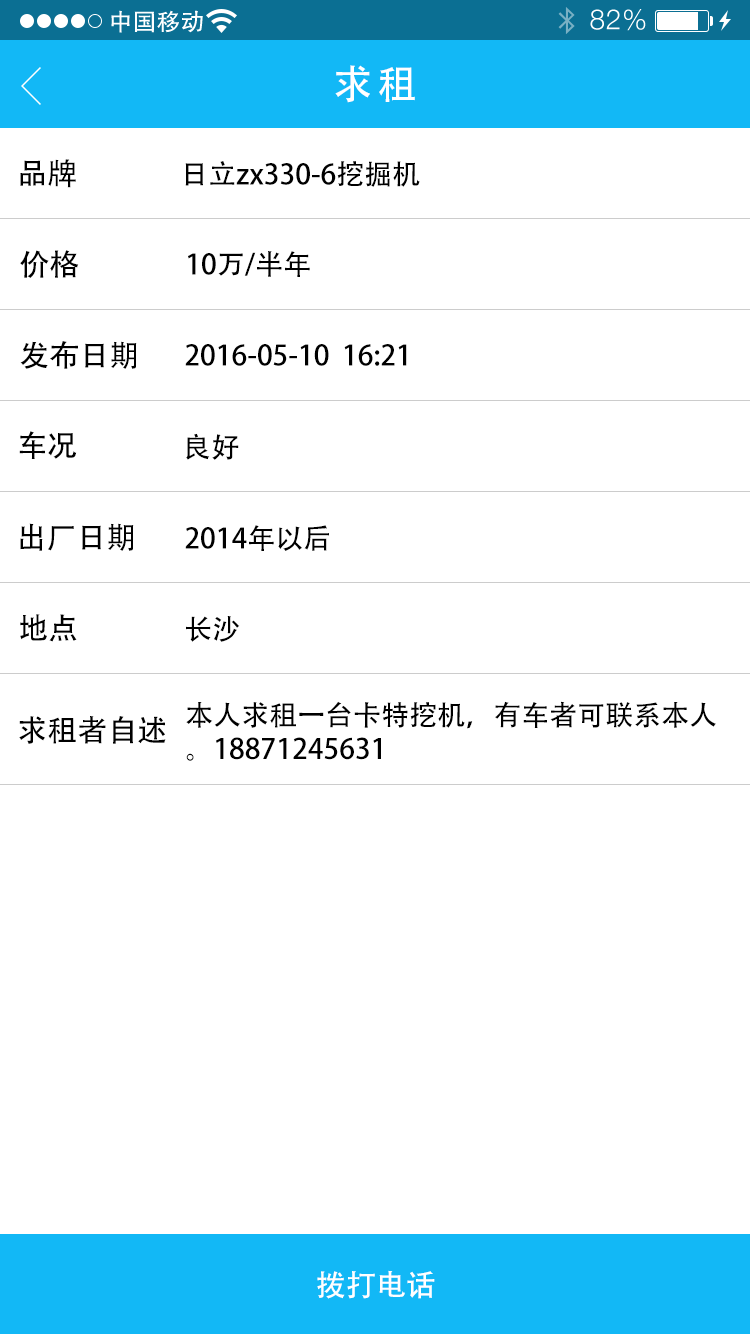
<style>
.page{position:relative;width:750px;height:1334px;background:#ffffff}
.page>*{position:absolute;margin:0}
.t1{font:40px "AdobeHeitiStd-Regular";letter-spacing:0.104em;color:#ffffff}
.t2{font:30px "AdobeHeitiStd-Regular";color:#000000}
.t3{font:28px "AdobeHeitiStd-Regular";color:#000000}
.t4{font:30px "AdobeHeitiStd-Regular";color:#ffffff}
</style>
<div class="page">
<p class="t1" style="left:335px;top:65px;width:80px;height:38px">求租</p>
<p class="t2" style="left:20px;top:159px;width:56px;height:29px">品牌</p>
<p class="t3" style="left:185px;top:161px;width:235px;height:26px">日立zx330-6挖掘机</p>
<p class="t2" style="left:20px;top:250px;width:59px;height:28px">价格</p>
<p class="t3" style="left:188px;top:251px;width:122px;height:26px">10万/半年</p>
<p class="t2" style="left:20px;top:341px;width:117px;height:28px">发布日期</p>
<p class="t3" style="left:185px;top:344px;width:222px;height:22px">2016-05-10  16:21</p>
<p class="t2" style="left:19px;top:431px;width:58px;height:28px">车况</p>
<p class="t3" style="left:186px;top:433px;width:53px;height:27px">良好</p>
<p class="t2" style="left:20px;top:523px;width:114px;height:28px">出厂日期</p>
<p class="t3" style="left:185px;top:525px;width:144px;height:26px">2014年以后</p>
<p class="t2" style="left:20px;top:614px;width:57px;height:28px">地点</p>
<p class="t3" style="left:186px;top:616px;width:54px;height:26px">长沙</p>
<p class="t3" style="left:186px;top:701px;width:530px;height:60px">本人求租一台卡特挖机，有车者可联系本人<br>。18871245631</p>
<p class="t2" style="left:19px;top:716px;width:147px;height:28px">求租者自述</p>
<p class="t4" style="left:317px;top:1270px;width:118px;height:29px">拨打电话</p>
</div>
